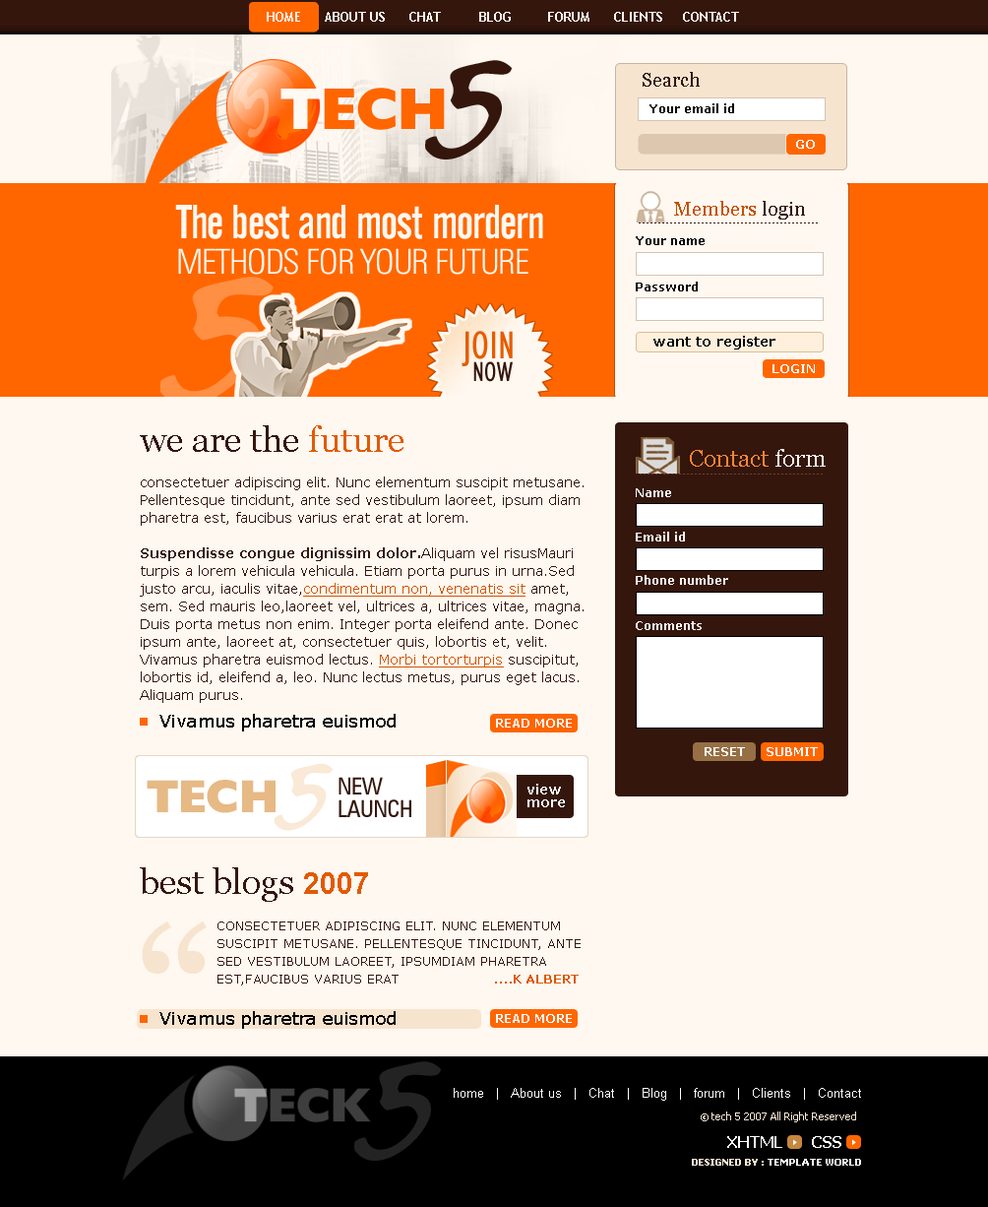
<style>
.page{position:relative;width:988px;height:1207px;background:#fff8f0}
.page>*{position:absolute;margin:0}
.t1{font:12.8px "TrebuchetMS-Bold";color:#fff8f0;text-transform:uppercase}
.t2{font:98.4px "Yearsupplyoffairycakes";color:#34160c;text-transform:uppercase}
.t3{font:47.3px "Yearsupplyoffairycakes";text-transform:uppercase;scale:1.11 1}
.t4{font:19.7px "Georgia";color:#34160c}
.t5{font:59.1px "Humanist521BT-ExtraBold";color:#ff6600;text-transform:uppercase}
.t6{font:59.1px "Humanist521BT-ExtraBold";color:#fff9f4;text-transform:uppercase}
.t7{font:11.8px "Verdana-Bold";color:#000000}
.t8{font:12.8px "Verdana-Bold";color:#ffffff;text-transform:uppercase}
.t9{font:47.2px "AlternateGothicNo2BT-Regular";letter-spacing:-0.02em;color:#fff8f0}
.t10{font:19.7px "Georgia";color:#c65002}
.t11{font:34.4px "ZurichBT-LightCondensed";letter-spacing:-0.025em;color:#fff8f0;text-transform:uppercase}
.t12{font:39.4px "Humanist521BT-RomanCondensed";color:#e65c00;text-transform:uppercase}
.t13{font:13.8px "Verdana-Bold";color:#000000}
.t14{font:27.6px "Humanist521BT-RomanCondensed";color:#34160c;text-transform:uppercase}
.t15{font:11.8px "Verdana-Bold";color:#ffffff;text-transform:uppercase}
.t16{font:13.8px/17.7px "Verdana";color:#34160c}
.t17{font:35.4px/17.7px "Georgia";color:#34160c}
.t18{font:35.4px/17.7px "Georgia";color:#e25a00}
.t19{font:13.8px/17.7px "Verdana-Bold";color:#34160c}
.t20{font:13.8px/17.7px "Verdana";color:#d15401;text-decoration:underline}
.t21{font:23.6px "Georgia";color:#ff8635}
.t22{font:23.6px "Georgia";color:#fff8f0}
.t23{font:11.8px "Verdana-Bold";color:#fff8f0}
.t24{font:17.7px "Verdana";color:#000000}
.t25{font:66.1px "Yearsupplyoffairycakes";color:#f9e9d6;text-transform:uppercase}
.t26{font:46.4px "Humanist521BT-ExtraBold";color:#e6b985;text-transform:uppercase}
.t27{font:23.6px "ZurichBT-RomanCondensed";letter-spacing:-0.025em;color:#34160c;text-transform:uppercase}
.t28{font:13.8px "Verdana-Bold";color:#ffffff}
.t29{font:35.4px "Georgia";color:#34160c}
.t30{font:29.5px "Arial-BoldMT";color:#e25a00}
.t31{font:196.8px "Georgia";color:#f7e4cf;text-transform:uppercase}
.t32{font:12.8px/17.7px "Verdana";color:#34160c;text-transform:uppercase}
.t33{font:12.8px/17.7px "Verdana-Bold";color:#dd5800;text-transform:uppercase}
.t34{font:98.4px "Yearsupplyoffairycakes";color:#232323;text-transform:uppercase}
.t35{font:12.8px "ArialMT";color:#ffffff}
.t36{font:10.8px "Tahoma";color:#fcead6}
.t37{font:8.9px "Tahoma-Bold";color:#fcead6;text-transform:uppercase}
.t38{font:15.7px "Tahoma-Bold";color:#ffffff;text-transform:uppercase}
.t39{font:8.9px "Tahoma-Bold";color:#ffffff;text-transform:uppercase}
</style>
<div class="page">
<p class="t1" style="left:267px;top:12px;width:472px;height:10px">home      About us      Chat          Blog         forum      Clients     Contact</p>
<p class="t2" style="left:425px;top:60px;width:87px;height:99px">5</p>
<p class="t3" style="left:237px;top:72px;width:32px;height:66px;rotate:-48deg">5</p>
<p class="t4" style="left:643px;top:72px;width:57px;height:15px">Search</p>
<p class="t5" style="left:281px;top:88px;width:164px;height:42px"><span class="t6">t</span>ech</p>
<p class="t7" style="left:650px;top:103px;width:84px;height:10px">Your email id</p>
<p class="t8" style="left:796px;top:140px;width:19px;height:9px">go</p>
<p class="t9" style="left:175px;top:205px;width:368px;height:34px">The best and most mordern</p>
<p class="t10" style="left:674px;top:201px;width:131px;height:18px">Members <span class="t4">login</span></p>
<p class="t7" style="left:636px;top:236px;width:69px;height:9px">Your name</p>
<p class="t11" style="left:178px;top:248px;width:351px;height:27px">methods for your future</p>
<p class="t7" style="left:636px;top:281px;width:62px;height:10px">Password</p>
<p class="t12" style="left:462px;top:331px;width:51px;height:35px">join</p>
<p class="t13" style="left:654px;top:336px;width:122px;height:13px">want to register</p>
<p class="t14" style="left:473px;top:361px;width:40px;height:21px">now</p>
<p class="t15" style="left:773px;top:364px;width:42px;height:9px">login</p>
<p class="t16" style="left:140px;top:425px;width:444px;height:278px"><span class="t17">we are the </span><span class="t18">future<br></span><br>consectetuer adipiscing elit. Nunc elementum suscipit metusane. Pellentesque tincidunt, ante sed vestibulum laoreet, ipsum diam pharetra est, faucibus varius erat erat at lorem. <br><br><span class="t19">Suspendisse congue dignissim dolor.</span>Aliquam vel risusMauri turpis a lorem vehicula vehicula. Etiam porta purus in urna.Sed justo arcu, iaculis vitae,<span class="t20">condimentum non, venenatis sit</span> amet, sem. Sed mauris leo,laoreet vel, ultrices a, ultrices vitae, magna. Duis porta metus non enim. Integer porta eleifend ante. Donec ipsum ante, laoreet at, consectetuer quis, lobortis et, velit. Vivamus pharetra euismod lectus. <span class="t20">Morbi tortorturpis </span>suscipitut, lobortis id, eleifend a, leo. Nunc lectus metus, purus eget lacus. Aliquam purus.</p>
<p class="t21" style="left:690px;top:449px;width:136px;height:18px">Contact <span class="t22">form</span></p>
<p class="t23" style="left:636px;top:488px;width:35px;height:9px">Name</p>
<p class="t23" style="left:636px;top:531px;width:49px;height:10px">Email id</p>
<p class="t23" style="left:636px;top:575px;width:92px;height:10px">Phone number</p>
<p class="t23" style="left:636px;top:621px;width:66px;height:9px">Comments</p>
<p class="t24" style="left:159px;top:714px;width:237px;height:17px">Vivamus pharetra euismod</p>
<p class="t15" style="left:496px;top:719px;width:76px;height:8px">read more</p>
<p class="t15" style="left:705px;top:747px;width:40px;height:9px">reset</p>
<p class="t15" style="left:767px;top:747px;width:51px;height:9px">Submit</p>
<p class="t25" style="left:275px;top:763px;width:58px;height:68px">5</p>
<p class="t26" style="left:147px;top:780px;width:129px;height:33px">tech</p>
<p class="t27" style="left:339px;top:777px;width:44px;height:17px">new</p>
<p class="t28" style="left:528px;top:783px;width:33px;height:11px">view</p>
<p class="t27" style="left:339px;top:799px;width:72px;height:18px">launch</p>
<p class="t28" style="left:528px;top:799px;width:37px;height:8px">more</p>
<p class="t29" style="left:140px;top:867px;width:228px;height:35px">best blogs <span class="t30">2007</span></p>
<p class="t31" style="left:142px;top:921px;width:65px;height:52px">“</p>
<p class="t32" style="left:218px;top:921px;width:363px;height:64px"><span class="t16"><br></span>consectetuer adipiscing elit. Nunc elementum suscipit metusane. Pellentesque tincidunt, ante sed vestibulum laoreet, ipsumdiam pharetra est,faucibus varius erat                   <span class="t33">....k albert<br></span>lorem.</p>
<p class="t24" style="left:159px;top:1011px;width:237px;height:18px">Vivamus pharetra euismod</p>
<p class="t15" style="left:496px;top:1014px;width:76px;height:9px">read more</p>
<p class="t34" style="left:354px;top:1061px;width:87px;height:99px">5</p>
<p class="t35" style="left:454px;top:1088px;width:407px;height:12px">home   |   About us   |   Chat   |   Blog   |   forum   |   Clients   |   Contact</p>
<p class="t36" style="left:701px;top:1111px;width:155px;height:11px"><span class="t37">© </span>tech 5 2007 All Right Reserved</p>
<p class="t38" style="left:727px;top:1136px;width:55px;height:12px">xhtml</p>
<p class="t38" style="left:812px;top:1136px;width:30px;height:12px">css</p>
<p class="t39" style="left:692px;top:1158px;width:169px;height:7px"><span class="t37">Designed by : </span>Template world</p>
</div>
